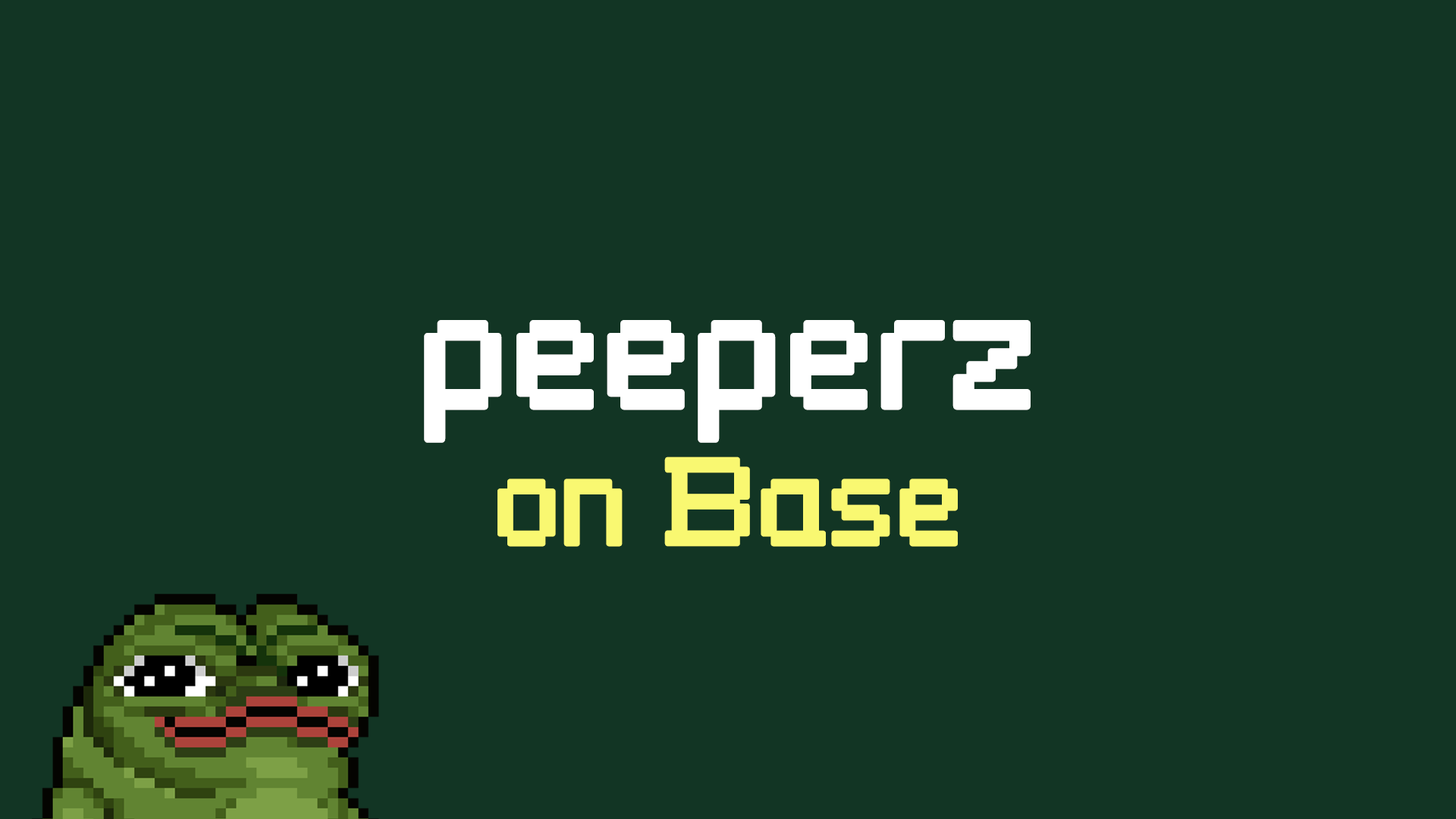
<style>
.page{position:relative;width:1456px;height:819px;background:#123524}
.page>*{position:absolute;margin:0}
.t1{font:151.7px "Wellbutrin";color:#ffffff}
.t2{font:113.7px "Wellbutrin";color:#f9f871}
</style>
<div class="page">
<p class="t1" style="left:424px;top:320px;width:607px;height:227px;text-align:center">peeperz<br><span class="t2">on Base</span></p>
</div>
